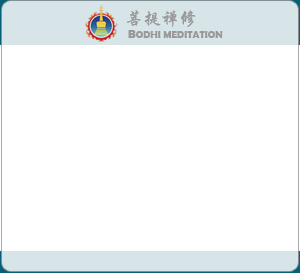
<style>
.page{position:relative;width:300px;height:273px;background:#ffffff}
.page>*{position:absolute;margin:0}
.t1{font:10px "BerlinSansFBDemi-Bold";color:#999999}
.t2{font:18px "STXingkai";color:#999999}
.t3{font:12px "BerlinSansFBDemi-Bold";color:#999999}
</style>
<div class="page">
<p class="t1" style="left:127px;top:10px;width:96px;height:28px"><span class="t2">菩提禅修<br></span><span class="t3"> B</span>ODHI MEDITATION</p>
</div>
